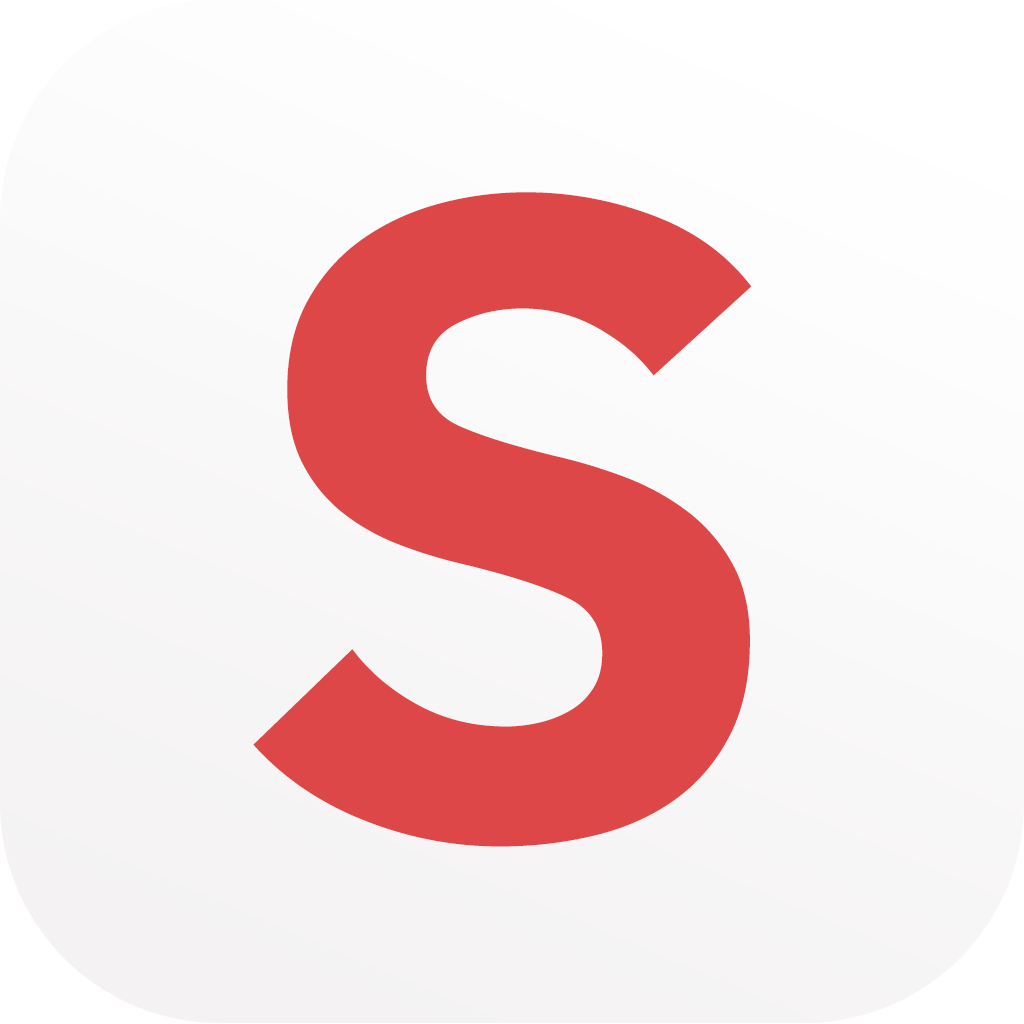
<style>
.page{position:relative;width:1024px;height:1024px}
.page>*{position:absolute;margin:0}
.t1{font:1287.5px "AvenirNext-DemiBold";letter-spacing:-0.075em;color:#de4747}
</style>
<div class="page">
<p class="t1" style="left:253px;top:192px;width:499px;height:655px">s</p>
</div>
